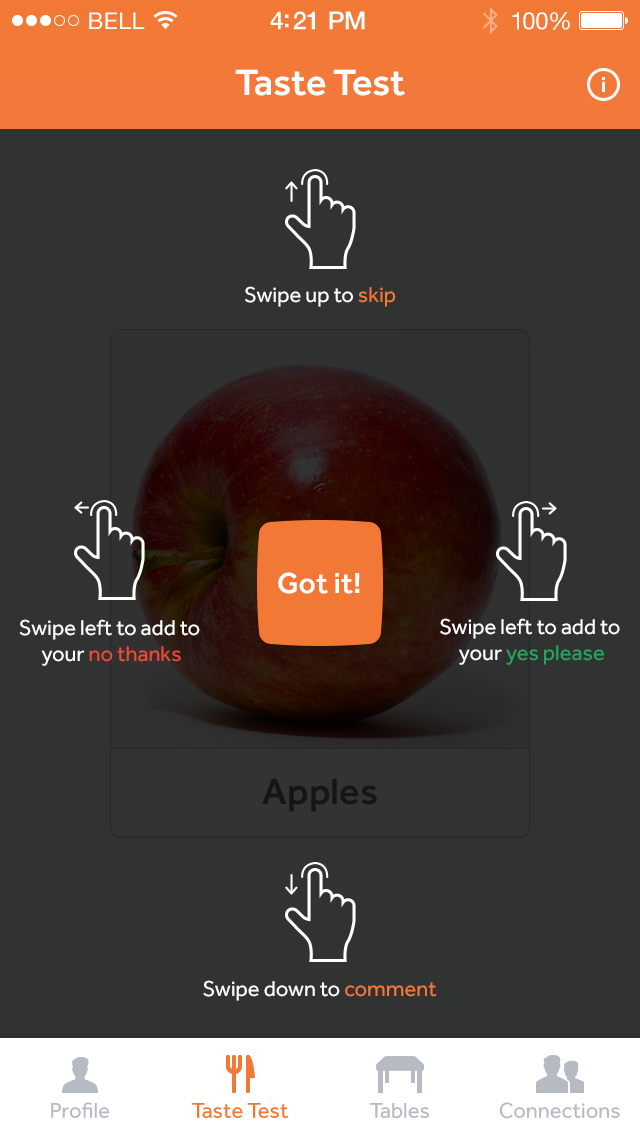
<style>
.page{position:relative;width:640px;height:1136px;background:#313232}
.page>*{position:absolute;margin:0}
.t1{font:23px "HelveticaNeue";letter-spacing:0.02em;color:#ffffff}
.t2{font:25px "HelveticaNeue-Medium";letter-spacing:-0.02em;color:#ffffff}
.t3{font:24px "HelveticaNeue";letter-spacing:-0.02em;color:#ffffff}
.t4{font:38px "Effra-Medium";color:#ffffff}
.t5{font:22px "Effra-Regular";color:#ffffff}
.t6{font:22px "Effra-Regular";color:#f27935}
.t7{font:30px "Effra-Medium";color:#ffffff}
.t8{font:22px "Effra-Regular";color:#ef4836}
.t9{font:22px "Effra-Regular";color:#26a65b}
.t10{font:38px "Effra-Medium";color:#141517}
.t11{font:22px "Effra-Regular";color:#b5bac3}
</style>
<div class="page">
<p class="t1" style="left:89px;top:12px;width:56px;height:17px">BELL</p>
<p class="t2" style="left:270px;top:11px;width:95px;height:19px">4:21 PM</p>
<p class="t3" style="left:512px;top:12px;width:58px;height:18px">100%</p>
<p class="t4" style="left:235px;top:69px;width:170px;height:27px">Taste Test</p>
<p class="t5" style="left:245px;top:286px;width:151px;height:21px">Swipe up to <span class="t6">skip</span></p>
<p class="t7" style="left:278px;top:572px;width:82px;height:22px">Got it!</p>
<p class="t5" style="left:19px;top:619px;width:181px;height:47px;text-align:center">Swipe left to add to <br>your <span class="t8">no thanks</span></p>
<p class="t5" style="left:440px;top:618px;width:180px;height:47px;text-align:center">Swipe left to add to <br>your <span class="t9">yes please</span></p>
<p class="t10" style="left:262px;top:778px;width:115px;height:34px">Apples</p>
<p class="t5" style="left:203px;top:980px;width:234px;height:21px">Swipe down to <span class="t6">comment</span></p>
<p class="t11" style="left:51px;top:1102px;width:59px;height:16px">Profile</p>
<p class="t6" style="left:191px;top:1103px;width:98px;height:15px">Taste Test</p>
<p class="t11" style="left:370px;top:1103px;width:59px;height:15px">Tables</p>
<p class="t11" style="left:499px;top:1102px;width:121px;height:17px">Connections</p>
</div>
